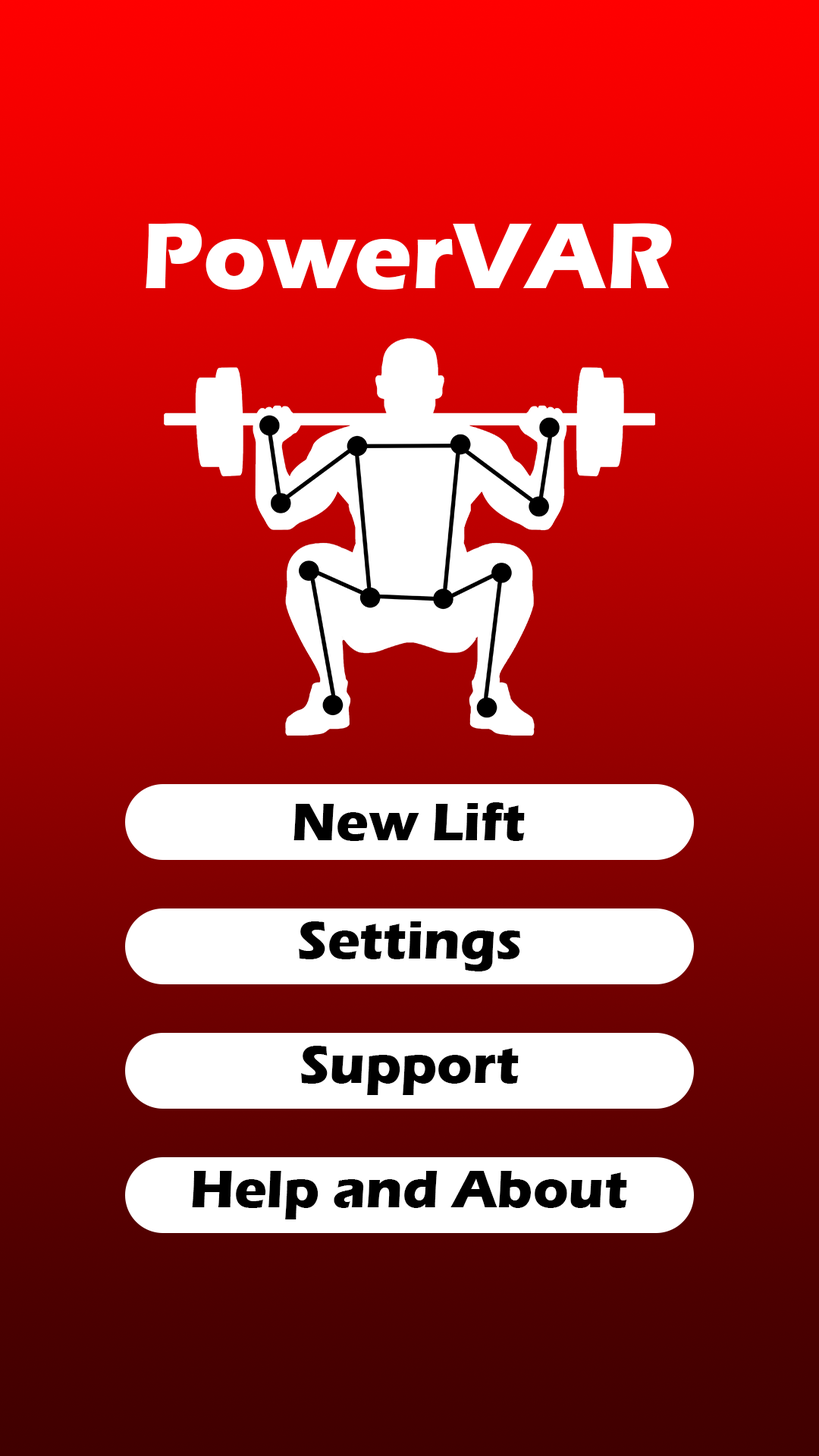
<style>
.page{position:relative;width:819px;height:1456px}
.page>*{position:absolute;margin:0}
.t1{font:97.1px "ErasITC-Bold";color:#ffffff}
.t2{font:54.6px "ErasITC-Bold";color:#000000}
</style>
<div class="page">
<p class="t1" style="left:146px;top:223px;width:526px;height:67px">PowerVAR</p>
<p class="t2" style="left:293px;top:802px;width:232px;height:39px">New Lift</p>
<p class="t2" style="left:299px;top:921px;width:221px;height:50px">Settings</p>
<p class="t2" style="left:301px;top:1046px;width:218px;height:49px">Support</p>
<p class="t2" style="left:192px;top:1171px;width:435px;height:48px">Help and About</p>
</div>
